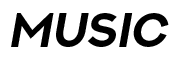
<style>
.page{position:relative;width:178px;height:60px;background:#ffffff}
.page>*{position:absolute;margin:0}
.t1{font:48px "NEXTART-Bold";color:#000000;font-style:italic}
</style>
<div class="page">
<p class="t1" style="left:11px;top:13px;width:158px;height:34px">MUSIC</p>
</div>
